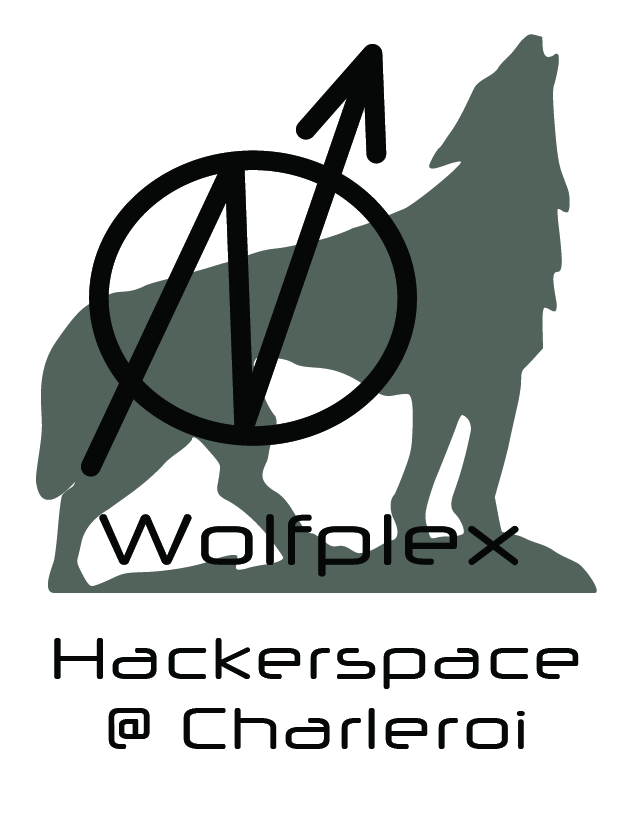
<style>
.page{position:relative;width:638px;height:827px;background:#ffffff}
.page>*{position:absolute;margin:0}
.t1{font:58.3px "NeuropolXFree";color:#060808}
</style>
<div class="page">
<p class="t1" style="left:54px;top:638px;width:525px;height:111px;text-align:center">Hackerspace<br>@ Charleroi</p>
</div>
